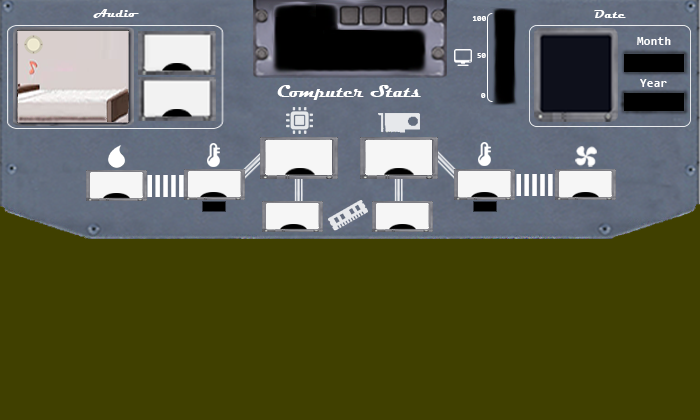
<style>
.page{position:relative;width:700px;height:420px;background:#404000}
.page>*{position:absolute;margin:0}
.t1{font:12.5px "Magneto-Bold";color:#ffffff}
.t2{font:8.3px "Consolas-Bold";color:#ffffff}
.t3{font:12.5px "Consolas-Bold";color:#ffffff}
.t4{font:16.7px "Magneto-Bold";color:#ffffff}
</style>
<div class="page">
<p class="t1" style="left:93px;top:9px;width:46px;height:9px">Audio</p>
<p class="t2" style="left:472px;top:16px;width:14px;height:5px">100</p>
<p class="t1" style="left:594px;top:10px;width:32px;height:8px">Date</p>
<p class="t3" style="left:637px;top:37px;width:34px;height:8px">Month</p>
<p class="t2" style="left:477px;top:53px;width:9px;height:5px">50</p>
<p class="t4" style="left:277px;top:85px;width:144px;height:15px">Computer Stats</p>
<p class="t3" style="left:640px;top:79px;width:27px;height:8px">Year</p>
<p class="t2" style="left:481px;top:93px;width:5px;height:5px">0</p>
</div>
